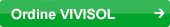
<style>
.page{position:relative;width:170px;height:27px;background:#00a42b}
.page>*{position:absolute;margin:0}
.t1{font:14px "Arial-BoldMT";color:#ffffff}
</style>
<div class="page">
<p class="t1" style="left:11px;top:8px;width:104px;height:12px">Ordine VIVISOL</p>
</div>
